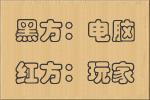
<style>
.page{position:relative;width:150px;height:100px}
.page>*{position:absolute;margin:0}
.t1{font:24px "STCaiyun";color:#3e3939}
</style>
<div class="page">
<p class="t1" style="left:15px;top:19px;width:120px;height:66px">黑方：电脑<br>红方：玩家</p>
</div>
